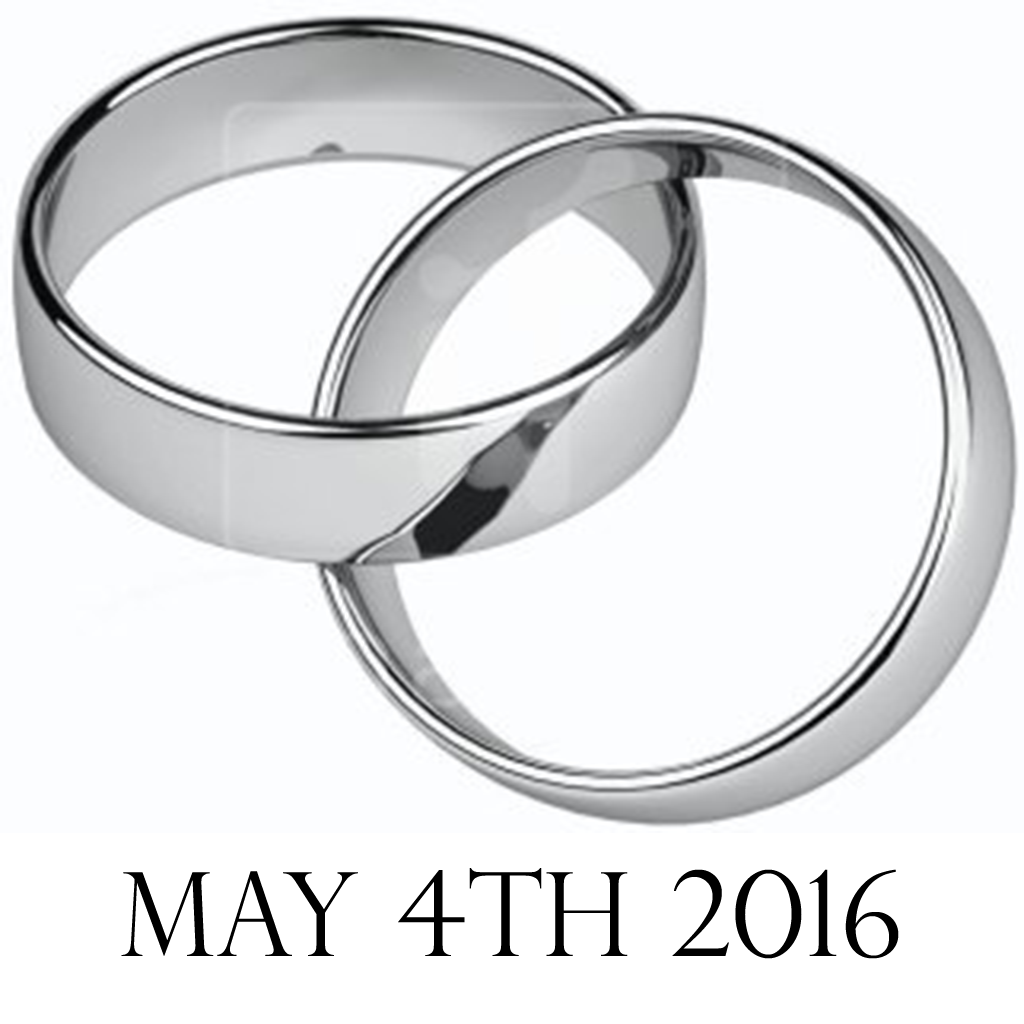
<style>
.page{position:relative;width:1024px;height:1024px;background:#fcfdff}
.page>*{position:absolute;margin:0}
.t1{font:116.5px "PerpetuaTitlingMT-Light";color:#000000;scale:0.96 1}
</style>
<div class="page">
<p class="t1" style="left:121px;top:868px;width:778px;height:91px">MAY 4th 2016</p>
</div>
